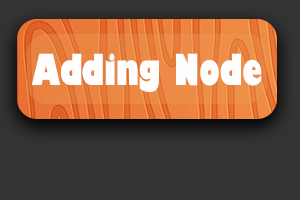
<style>
.page{position:relative;width:300px;height:200px;background:#333333}
.page>*{position:absolute;margin:0}
.t1{font:41.7px "GillSans-UltraBoldCondensed";color:#fefefe}
</style>
<div class="page">
<p class="t1" style="left:31px;top:53px;width:231px;height:39px">Adding Node</p>
</div>
